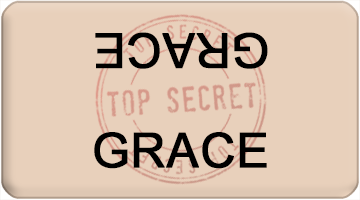
<style>
.page{position:relative;width:360px;height:200px;background:#e8d0bb}
.page>*{position:absolute;margin:0}
.t1{font:48px "ArialMT";color:#000000;font-weight:bold}
</style>
<div class="page">
<p class="t1" style="left:95px;top:32px;width:173px;height:37px;rotate:180deg">GRACE</p>
<p class="t1" style="left:94px;top:132px;width:173px;height:37px">GRACE</p>
</div>
